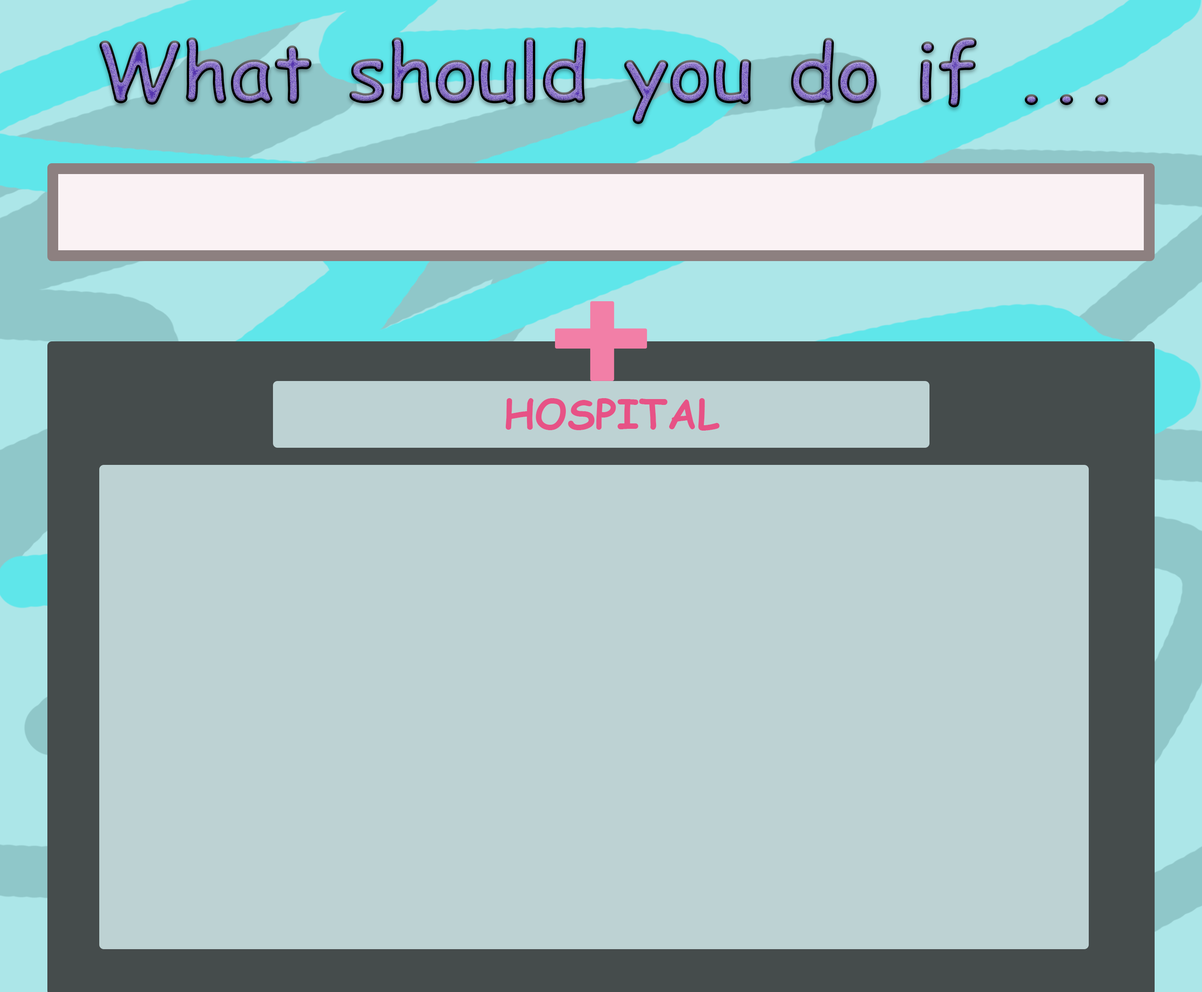
<style>
.page{position:relative;width:1202px;height:992px;background:#bdd2d3}
.page>*{position:absolute;margin:0}
.t1{font:81.2px "ComicSansMS-Bold"}
.t2{font:40.6px "ComicSansMS-Bold";color:#e75286}
</style>
<div class="page">
<p class="t1" style="left:99px;top:37px;width:1009px;height:87px">What should you do if ...</p>
<p class="t2" style="left:505px;top:398px;width:214px;height:33px">HOSPITAL</p>
</div>
